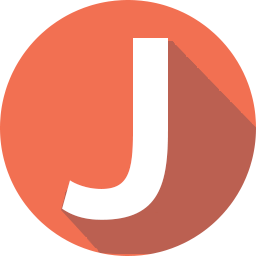
<style>
.page{position:relative;width:256px;height:256px;background:#f27052}
.page>*{position:absolute;margin:0}
.t1{font:252.5px "Raleway-v4020-Bold";color:#ffffff}
</style>
<div class="page">
<p class="t1" style="left:62px;top:38px;width:106px;height:182px">J</p>
</div>
